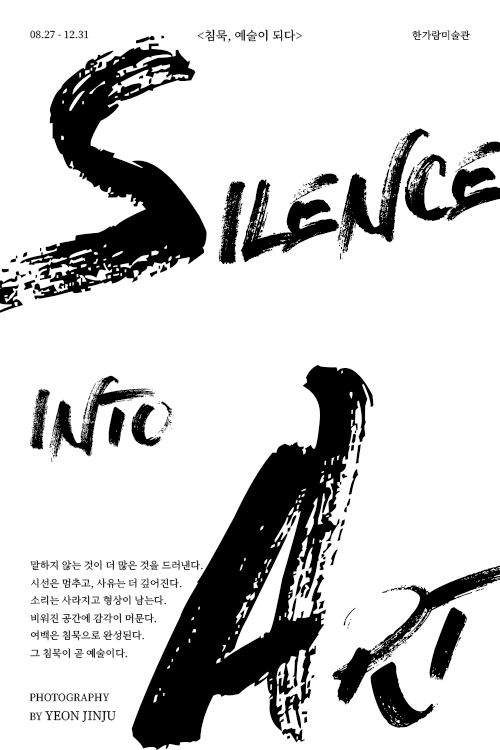
<style>
.page{position:relative;width:500px;height:750px;background:#ffffff}
.page>*{position:absolute;margin:0}
.t1{font:10px "NotoSerifKR-Regular";color:#000000}
.t2{font:12px "NotoSerifKR-Regular";color:#000000}
.t3{font:10px "NotoSerifKR-Regular"}
.t4{font:75px "DryBrush";color:#000000;text-transform:uppercase}
.t5{font:10px "NotoSerifKR-Regular";color:#000000;text-transform:uppercase}
.t6{font:12px "NotoSerifKR-Regular";color:#000000;text-transform:uppercase}
</style>
<div class="page">
<p class="t1" style="left:30px;top:30px;width:59px;height:9px">08.27 - 12.31</p>
<p class="t2" style="left:197px;top:29px;width:105px;height:14px">&lt;침묵, 예술이 되다&gt;</p>
<p class="t3" style="left:412px;top:30px;width:58px;height:11px">한가람미술관</p>
<p class="t4" style="left:30px;top:375px;width:144px;height:87px">Into</p>
<p class="t3" style="left:30px;top:560px;width:173px;height:99px">말하지 않는 것이 더 많은 것을 드러낸다.<br>시선은 멈추고, 사유는 더 깊어진다.<br>소리는 사라지고 형상이 남는다.<br>비워진 공간에 감각이 머문다.<br>여백은 침묵으로 완성된다.<br>그 침묵이 곧 예술이다.</p>
<p class="t5" style="left:29px;top:693px;width:87px;height:29px">Photography<br>by <span class="t6">YEON JINJU</span></p>
</div>
